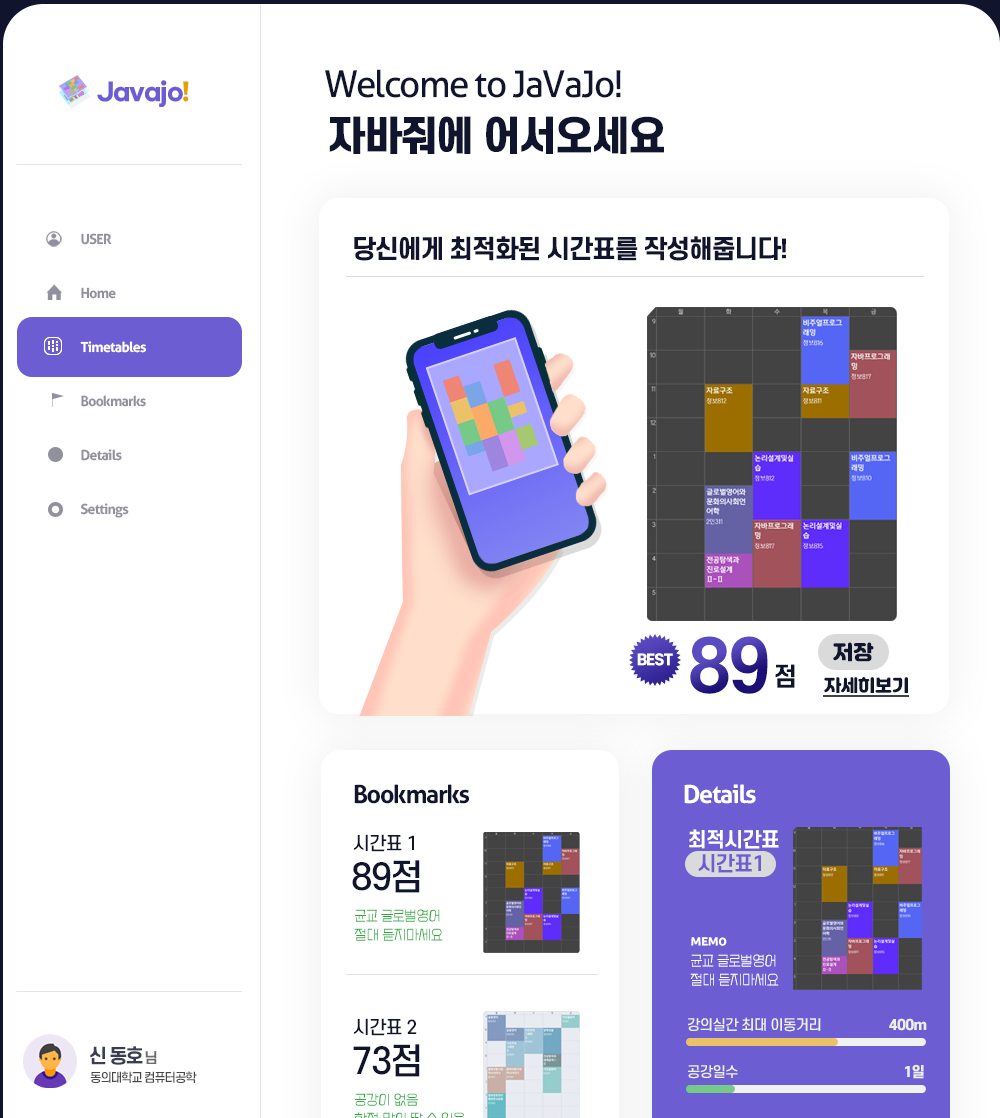
<style>
.page{position:relative;width:1000px;height:1118px;background:#ffffff}
.page>*{position:absolute;margin:0}
.t1{font:37px "Aller";letter-spacing:-0.05em;color:#11142d}
.t2{font:24px "GmarketSansBold";letter-spacing:-0.05em;color:#6c5dd3}
.t3{font:24px "GmarketSansBold";letter-spacing:-0.05em;color:#e5a100}
.t4{font:40px "S-CoreDream-8Heavy";letter-spacing:-0.05em;color:#11142d}
.t5{font:14px/27px "Aller-Bold";letter-spacing:-0.05em;color:#90919d}
.t6{font:14px/27px "Aller-Bold";letter-spacing:-0.05em;color:#ffffff}
.t7{font:25px "S-CoreDream-7ExtraBold";letter-spacing:-0.05em;color:#11142d}
.t8{font:70px "S-CoreDream-6Bold";letter-spacing:-0.05em}
.t9{font:15px "S-CoreDream-8Heavy";letter-spacing:-0.05em;color:#ffffff}
.t10{font:20px "JalnanOTF";color:#11142d}
.t11{font:25px "S-CoreDream-6Bold";letter-spacing:-0.05em;color:#11142d}
.t12{font:17px "JalnanOTF";color:#11142d}
.t13{font:25px "Aller-Bold";letter-spacing:-0.05em;color:#11142d}
.t14{font:25px "Aller-Bold";letter-spacing:-0.05em;color:#ffffff}
.t15{font:20px/24px "S-CoreDream-6Bold";letter-spacing:-0.05em;color:#ffffff}
.t16{font:20px/24px "S-CoreDream-6Bold";letter-spacing:-0.05em;color:#6c5dd3}
.t17{font:18px "S-CoreDream-5Medium";letter-spacing:-0.05em;color:#11142d}
.t18{font:35px "S-CoreDream-5Medium";letter-spacing:-0.05em;color:#11142d}
.t19{font:14px/19px "Cafe24-Ohsquareair";letter-spacing:-0.025em;color:#2dab3f}
.t20{font:14px/19px "Cafe24-Ohsquareair";letter-spacing:-0.025em;color:#ffffff}
.t21{font:15px/19px "Aller-Bold";letter-spacing:-0.025em;color:#ffffff}
.t22{font:14px "S-CoreDream-5Medium";letter-spacing:-0.05em;color:#eeeeee}
.t23{font:14px "S-CoreDream-8Heavy";letter-spacing:-0.05em;color:#eeeeee}
.t24{font:19px "S-CoreDream-7ExtraBold";letter-spacing:-0.1em;color:#3b3d50}
.t25{font:14px "S-CoreDream-6Bold";letter-spacing:-0.1em;color:#6d6d6d}
.t26{font:12px "S-CoreDream-5Medium";letter-spacing:-0.1em;color:#494949}
</style>
<div class="page">
<p class="t1" style="left:325px;top:69px;width:296px;height:29px">Welcome to JaVaJo!</p>
<p class="t2" style="left:97px;top:80px;width:92px;height:28px">Javajo<span class="t3">!</span></p>
<p class="t4" style="left:329px;top:116px;width:335px;height:38px">자바줘에 어서오세요</p>
<p class="t5" style="left:80px;top:233px;width:67px;height:285px">USER<br><br>Home<br><br><span class="t6">Timetables<br></span><br>Bookmarks<br><br>Details<br><br>Settings</p>
<p class="t7" style="left:354px;top:236px;width:432px;height:25px">당신에게 최적화된 시간표를 작성해줍니다!</p>
<p class="t8" style="left:690px;top:636px;width:78px;height:58px">89</p>
<p class="t9" style="left:637px;top:653px;width:36px;height:13px">BEST</p>
<p class="t10" style="left:833px;top:642px;width:41px;height:20px">저장</p>
<p class="t11" style="left:775px;top:664px;width:20px;height:24px">점</p>
<p class="t12" style="left:824px;top:677px;width:84px;height:16px">자세히보기</p>
<p class="t13" style="left:354px;top:784px;width:115px;height:20px">Bookmarks</p>
<p class="t14" style="left:684px;top:784px;width:72px;height:20px">Details</p>
<p class="t15" style="left:689px;top:829px;width:90px;height:44px">최적시간표<br><span class="t16">  시간표1</span></p>
<p class="t17" style="left:354px;top:834px;width:60px;height:18px">시간표 1</p>
<p class="t18" style="left:352px;top:860px;width:68px;height:33px">89점</p>
<p class="t19" style="left:354px;top:909px;width:89px;height:32px">균교 글로벌영어<br>절대 듣지마세요</p>
<p class="t20" style="left:690px;top:937px;width:89px;height:49px"><span class="t21">MEMo<br></span>균교 글로벌영어<br>절대 듣지마세요</p>
<p class="t17" style="left:354px;top:1018px;width:63px;height:18px">시간표 2</p>
<p class="t22" style="left:688px;top:1017px;width:239px;height:15px">강의실간 최대 이동거리                    <span class="t23">400m</span></p>
<p class="t24" style="left:90px;top:1046px;width:67px;height:19px">신 동호 <span class="t25">님</span></p>
<p class="t18" style="left:353px;top:1044px;width:67px;height:33px">73점</p>
<p class="t26" style="left:90px;top:1071px;width:107px;height:12px">동의대학교 컴퓨터공학</p>
<p class="t22" style="left:688px;top:1064px;width:236px;height:15px">공강일수                                                 <span class="t23">1일</span></p>
</div>
